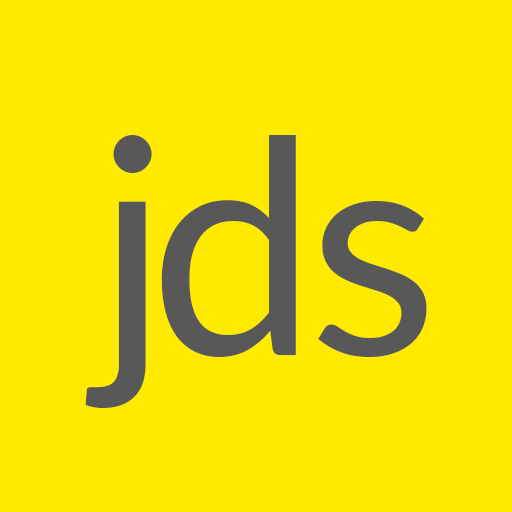
<style>
.page{position:relative;width:512px;height:512px;background:#ffea00}
.page>*{position:absolute;margin:0}
.t1{font:300px "Lato-Regular";letter-spacing:0.6em;color:#585858}
</style>
<div class="page">
<p class="t1" style="left:85px;top:135px;width:67px;height:273px">j</p>
<p class="t1" style="left:161px;top:135px;width:135px;height:222px">d</p>
<p class="t1" style="left:318px;top:201px;width:109px;height:156px">s</p>
</div>
